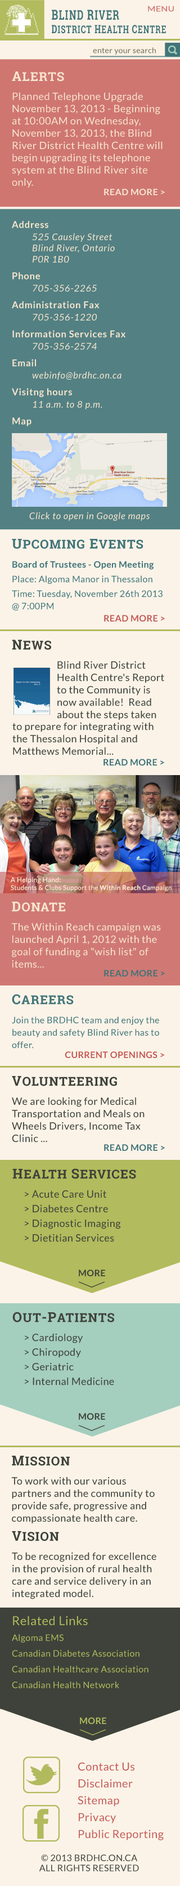
<style>
.page{position:relative;width:180px;height:1886px;background:#fbf3e8}
.page>*{position:absolute;margin:0}
.t1{font:7.3px "Lato-Regular";letter-spacing:0.025em;color:#d07974;scale:1.21 1}
.t2{font:13.2px "RobotoSlab-Bold";letter-spacing:0.075em;color:#417377;scale:0.71 1}
.t3{font:14.1px "RobotoSlab-Bold";letter-spacing:0.075em;color:#417377;scale:0.71 1}
.t4{font:10.8px "RobotoSlab-Bold";letter-spacing:0.075em;color:#417377;scale:0.71 1}
.t5{font:11.5px "RobotoSlab-Bold";letter-spacing:0.075em;color:#417377;scale:0.71 1}
.t6{font:7.7px "Lato-Regular";letter-spacing:0.025em;color:#6d6e58}
.t7{font:10.1px/12.3px "Lato-Regular";letter-spacing:0.025em;color:#f7e5cd}
.t8{font:13.5px "RobotoSlab-Bold";letter-spacing:0.05em;color:#f7e5cd}
.t9{font:12.4px "RobotoSlab-Bold";letter-spacing:0.05em;color:#f7e5cd}
.t10{font:8.9px "Lato-Bold";letter-spacing:0.025em;color:#f7e6ce}
.t11{font:9.3px "Lato-Italic";letter-spacing:0.05em;color:#f7e6ce}
.t12{font:9.3px "Lato-Bold";letter-spacing:0.05em;color:#f7e6ce}
.t13{font:9px/12.4px "Lato-Regular";letter-spacing:0.025em;color:#417478}
.t14{font:13.5px "RobotoSlab-Bold";letter-spacing:0.05em;color:#417478}
.t15{font:12.4px "RobotoSlab-Bold";letter-spacing:0.05em;color:#417478}
.t16{font:9px/12.4px "Lato-Bold";letter-spacing:0.025em;color:#417478}
.t17{font:9px "Lato-Bold";letter-spacing:0.025em;color:#c45b56}
.t18{font:10.1px/12.4px "Lato-Regular";letter-spacing:0.025em;color:#3e423a}
.t19{font:13.5px "RobotoSlab-Bold";letter-spacing:0.05em;color:#3e423a}
.t20{font:12.4px "RobotoSlab-Bold";letter-spacing:0.05em;color:#3e423a}
.t21{font:9px "Lato-Bold";letter-spacing:0.025em;color:#417378}
.t22{font:6.5px "Lato-Regular";letter-spacing:0.025em;color:#f7e6ce}
.t23{font:6.8px "Lato-Regular";letter-spacing:0.025em;color:#f7e6ce}
.t24{font:6.5px "Lato-Bold";letter-spacing:0.025em;color:#f7e6ce}
.t25{font:10.1px/12.4px "Lato-Regular";letter-spacing:0.025em;color:#f7e6ce}
.t26{font:13.5px "RobotoSlab-Bold";letter-spacing:0.05em;color:#f7e6ce}
.t27{font:12.4px "RobotoSlab-Bold";letter-spacing:0.05em;color:#f7e6ce}
.t28{font:9px "Lato-Bold";letter-spacing:0.025em;color:#3e423a}
.t29{font:9px/13.5px "Lato-Regular";letter-spacing:0.025em;color:#b2bb5d}
.t30{font:12.4px/13.5px "Lato-Regular";letter-spacing:0.025em;color:#b2bb5d}
.t31{font:9px "Lato-Bold";letter-spacing:0.025em;color:#b1bb5d}
.t32{font:11.2px/14.6px "Lato-Regular";letter-spacing:0.025em;color:#c55b57}
.t33{font:9px/10.1px "Lato-Regular";letter-spacing:0.025em;color:#3e423a}
</style>
<div class="page">
<p class="t1" style="left:148px;top:6px;width:26px;height:6px">MENU</p>
<p class="t2" style="left:52px;top:10px;width:67px;height:10px"><span class="t3">B</span>LIND <span class="t3">R</span>IVER</p>
<p class="t4" style="left:52px;top:25px;width:114px;height:9px"><span class="t5">D</span>ISTRICT <span class="t5">H</span>EALTH <span class="t5">C</span>ENTRE</p>
<p class="t6" style="left:93px;top:47px;width:63px;height:8px">enter your search</p>
<p class="t7" style="left:12px;top:71px;width:151px;height:117px"><span class="t8">A</span><span class="t9">LERTS<br></span>Planned Telephone Upgrade November 13, 2013 - Beginning at 10:00AM on Wednesday, November 13, 2013, the Blind River District Health Centre will begin upgrading its telephone system at the Blind River site only.</p>
<p class="t10" style="left:104px;top:188px;width:61px;height:7px">READ MORE &gt;</p>
<p class="t11" style="left:12px;top:220px;width:138px;height:301px"><span class="t12">Address<br> </span>525 Causley Street<br> Blind River, Ontario<br> P0R 1B0<br><span class="t12">Phone<br> </span>705-356-2265<br><span class="t12">Administration Fax<br> </span>705-356-1220<br><span class="t12">Information Services Fax<br> </span>705-356-2574<br><span class="t12">Email<br> </span>webinfo@brdhc.on.ca<br><span class="t12">Visitng hours<br> </span>11 a.m. to 8 p.m. <br><span class="t12">Map<br><br><br><br><br><br><br></span>Click to open in Google maps</p>
<p class="t13" style="left:12px;top:539px;width:151px;height:72px"><span class="t14">U</span><span class="t15">PCOMING</span><span class="t14"> E</span><span class="t15">VENTS<br></span><span class="t16">Board of Trustees - Open Meeting<br></span>Place: Algoma Manor in Thessalon<br>Time: Tuesday, November 26th 2013 @ 7:00PM</p>
<p class="t17" style="left:104px;top:615px;width:61px;height:7px">READ MORE &gt;</p>
<p class="t18" style="left:12px;top:640px;width:152px;height:80px"><span class="t19">N</span><span class="t20">EWS<br></span>Blind River District Health Centre's Report to the Community is now available!  Read about the steps taken</p>
<p class="t18" style="left:12px;top:722px;width:142px;height:33px">to prepare for integrating with the Thessalon Hospital and Matthews Memorial...</p>
<p class="t21" style="left:104px;top:759px;width:60px;height:7px">READ MORE &gt;</p>
<p class="t22" style="left:10px;top:877px;width:162px;height:15px"><span class="t23">A Helping Hand: <br></span>Students &amp; Clubs Support the <span class="t24">Within Reach</span> Campaign</p>
<p class="t25" style="left:11px;top:902px;width:150px;height:66px"><span class="t26">D</span><span class="t27">ONATE<br></span>The Within Reach campaign was launched April 1, 2012 with the goal of funding a "wish list" of items...</p>
<p class="t21" style="left:104px;top:970px;width:61px;height:6px">READ MORE &gt;</p>
<p class="t13" style="left:12px;top:994px;width:147px;height:54px"><span class="t14">C</span><span class="t15">AREERS<br></span>Join the BRDHC team and enjoy the beauty and safety Blind River has to offer.</p>
<p class="t17" style="left:65px;top:1051px;width:99px;height:7px">CURRENT OPENINGS &gt;</p>
<p class="t18" style="left:12px;top:1076px;width:133px;height:66px"><span class="t19">V</span><span class="t20">OLUNTEERING<br></span>We are looking for Medical Transportation and Meals on Wheels Drivers, Income Tax Clinic ...</p>
<p class="t21" style="left:104px;top:1144px;width:61px;height:7px">READ MORE &gt;</p>
<p class="t18" style="left:12px;top:1168px;width:124px;height:74px"><span class="t19">H</span><span class="t20">EALTH </span><span class="t19">S</span><span class="t20">ERVICES</span><br>&gt; Acute Care Unit<br>&gt; Diabetes Centre<br>&gt; Diagnostic Imaging<br>&gt; Dietitian Services</p>
<p class="t28" style="left:79px;top:1270px;width:26px;height:6px">MORE</p>
<p class="t18" style="left:12px;top:1312px;width:102px;height:73px"><span class="t19">O</span><span class="t20">UT</span><span class="t19">-P</span><span class="t20">ATIENTS<br></span>&gt; Cardiology<br>&gt; Chiropody<br>&gt; Geriatric<br>&gt; Internal Medicine</p>
<p class="t28" style="left:79px;top:1413px;width:26px;height:7px">MORE</p>
<p class="t18" style="left:11px;top:1456px;width:144px;height:68px"><span class="t19">M</span><span class="t20">ISSION<br></span>To work with our various partners and the community to provide safe, progressive and compassionate health care.</p>
<p class="t18" style="left:12px;top:1531px;width:144px;height:68px"><span class="t19">V</span><span class="t20">ISION<br></span>To be recognized for excellence in the provision of rural health care and service delivery in an integrated model.</p>
<p class="t29" style="left:12px;top:1616px;width:136px;height:73px"><span class="t30">Related Links<br></span>Algoma EMS<br>Canadian Diabetes Association<br>Canadian Healthcare Association<br>Canadian Health Network</p>
<p class="t31" style="left:80px;top:1717px;width:26px;height:7px">MORE</p>
<p class="t32" style="left:78px;top:1762px;width:86px;height:78px">Contact Us<br>Disclaimer<br>Sitemap<br>Privacy<br>Public Reporting</p>
<p class="t33" style="left:39px;top:1855px;width:100px;height:16px;text-align:center">© 2013 BRDHC.ON.CA<br>ALL RIGHTS RESERVED</p>
</div>
